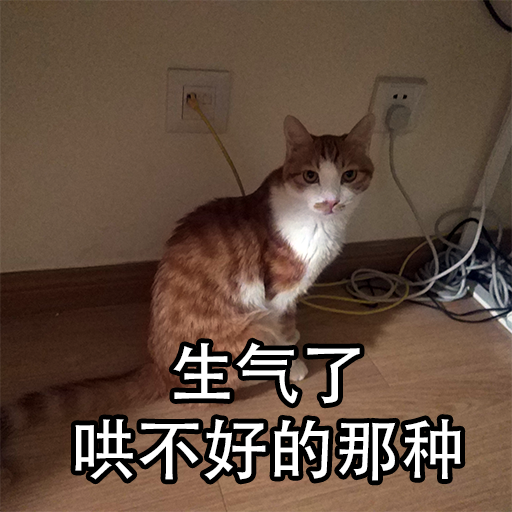
<style>
.page{position:relative;width:512px;height:512px}
.page>*{position:absolute;margin:0}
.t1{font:66px "AdobeHeitiStd-Regular";color:#ffffff}
</style>
<div class="page">
<p class="t1" style="left:173px;top:342px;width:187px;height:62px">生气了</p>
<p class="t1" style="left:75px;top:419px;width:386px;height:62px">哄不好的那种</p>
</div>
